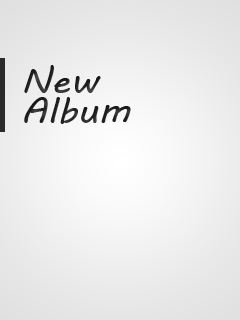
<style>
.page{position:relative;width:240px;height:320px}
.page>*{position:absolute;margin:0}
.t1{font:36.1px/30px "MVBoli";color:#232323;scale:1.05 1}
</style>
<div class="page">
<p class="t1" style="left:24px;top:65px;width:107px;height:59px">New<br>Album</p>
</div>
